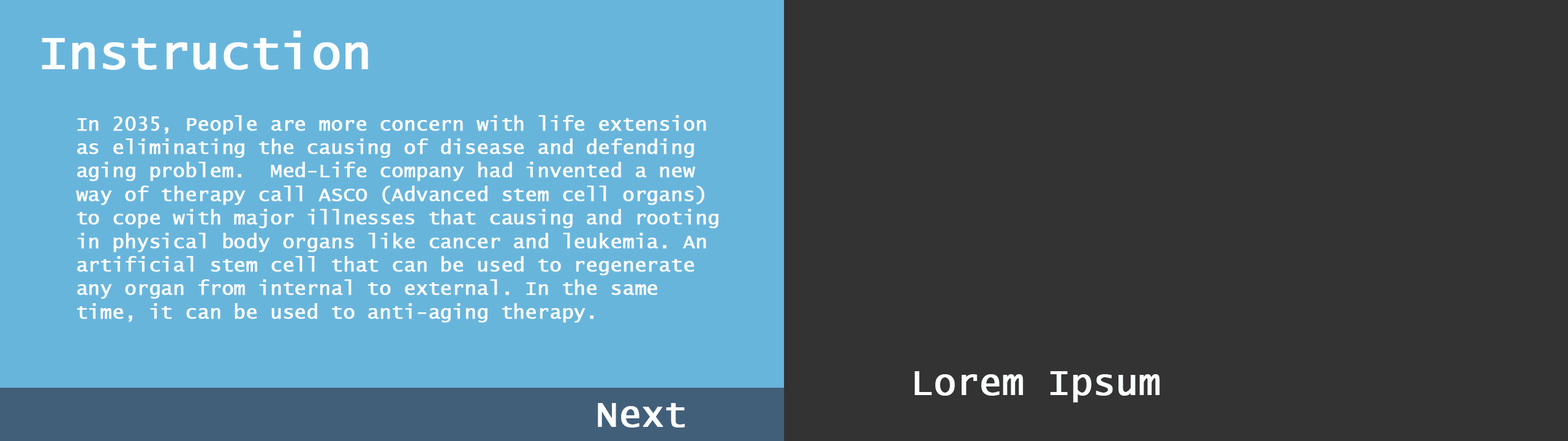
<style>
.page{position:relative;width:1568px;height:441px;background:#333333}
.page>*{position:absolute;margin:0}
.t1{font:49px "LucidaConsole";letter-spacing:-0.01em;color:#fbfeff;font-weight:bold}
.t2{font:19.6px "LucidaConsole";letter-spacing:-0.01em;color:#fbfeff;font-weight:bold}
.t3{font:36.8px "LucidaConsole";letter-spacing:-0.01em;color:#fbfeff;font-weight:bold}
</style>
<div class="page">
<p class="t1" style="left:42px;top:31px;width:326px;height:39px">Instruction</p>
<p class="t2" style="left:76px;top:115px;width:642px;height:208px">In 2035, People are more concern with life extension as eliminating the causing of disease and defending aging problem.  Med-Life company had invented a new way of therapy call ASCO (Advanced stem cell organs) to cope with major illnesses that causing and rooting in physical body organs like cancer and leukemia. An artificial stem cell that can be used to regenerate any organ from internal to external. In the same time, it can be used to anti-aging therapy.</p>
<p class="t3" style="left:914px;top:371px;width:246px;height:31px">Lorem Ipsum</p>
<p class="t3" style="left:598px;top:403px;width:87px;height:25px">Next</p>
</div>
